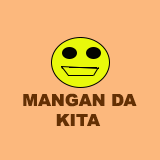
<style>
.page{position:relative;width:160px;height:160px;background:#fcb87d}
.page>*{position:absolute;margin:0}
.t1{font:16.7px "Arial-Black";color:#643003}
</style>
<div class="page">
<p class="t1" style="left:23px;top:93px;width:114px;height:33px">MANGAN DA <br>                      KITA</p>
</div>
